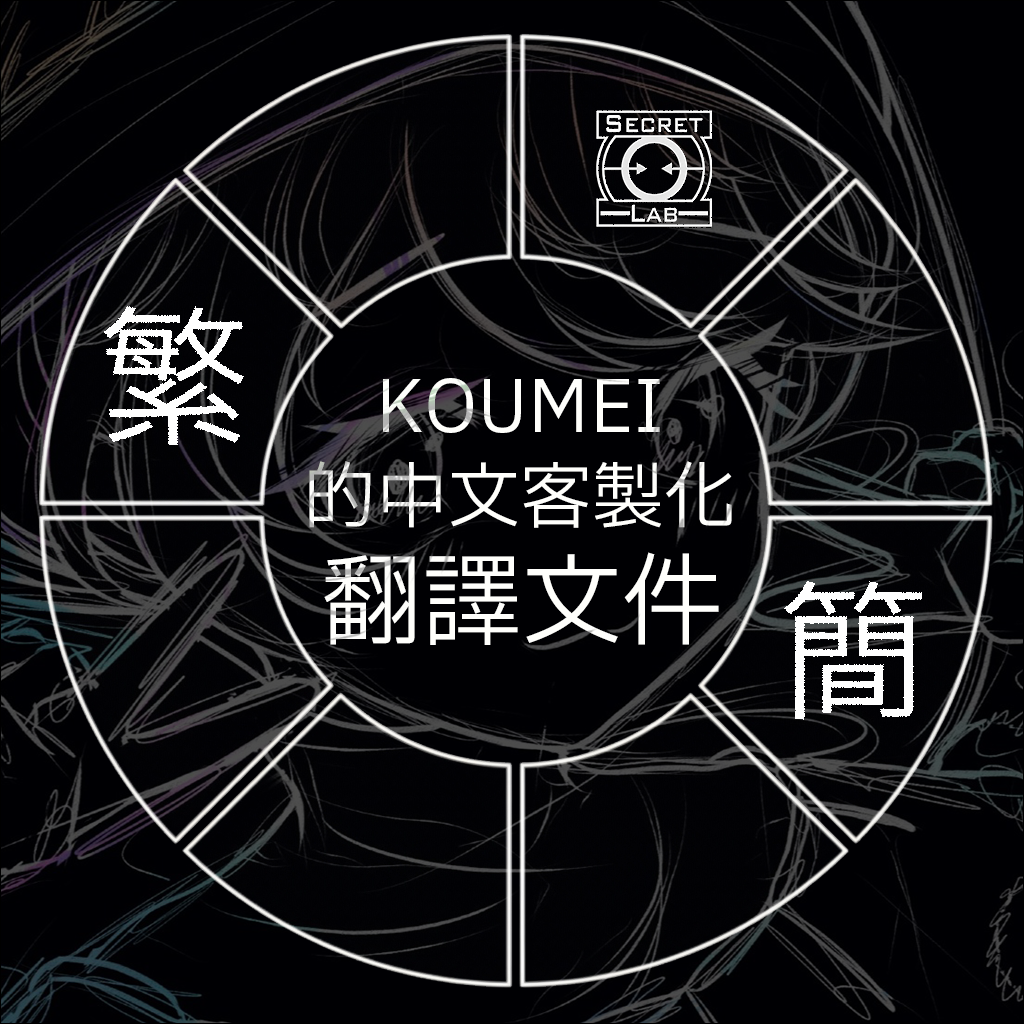
<style>
.page{position:relative;width:1024px;height:1024px;background:#000003}
.page>*{position:absolute;margin:0}
.t1{font:150px "IBMPlexSansTC";color:#ffffff}
.t2{font:72px "IBMPlexSansTC";color:#ffffff}
.t3{font:100px "IBMPlexSansTC";color:#ffffff}
</style>
<div class="page">
<p class="t1" style="left:103px;top:306px;width:141px;height:140px">繁</p>
<p class="t2" style="left:383px;top:378px;width:277px;height:55px">KOUMEI</p>
<p class="t2" style="left:309px;top:461px;width:423px;height:67px">的中文客製化</p>
<p class="t3" style="left:324px;top:552px;width:395px;height:93px">翻譯文件</p>
<p class="t1" style="left:784px;top:581px;width:138px;height:139px">簡</p>
</div>
